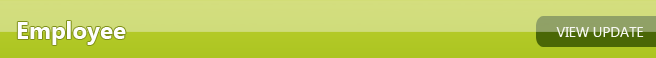
<style>
.page{position:relative;width:656px;height:58px}
.page>*{position:absolute;margin:0}
.t1{font:24px "SegoeUI-Bold";color:#fefefe}
.t2{font:14px "SegoeUI";color:#f6f7f1}
</style>
<div class="page">
<p class="t1" style="left:17px;top:21px;width:109px;height:24px">Employee</p>
<p class="t2" style="left:556px;top:27px;width:88px;height:10px">VIEW UPDATE</p>
</div>
